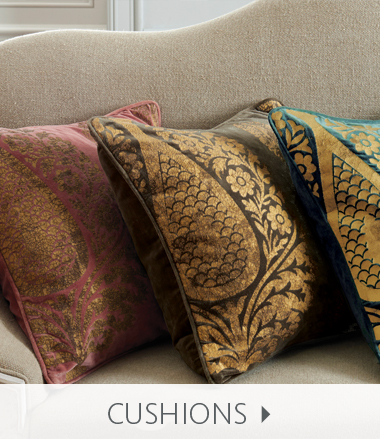
<style>
.page{position:relative;width:380px;height:439px}
.page>*{position:absolute;margin:0}
.t1{font:31.1px "BlissPro-ExtraLight";color:#585d60}
</style>
<div class="page">
<p class="t1" style="left:108px;top:403px;width:138px;height:21px">CUSHIONS</p>
</div>
